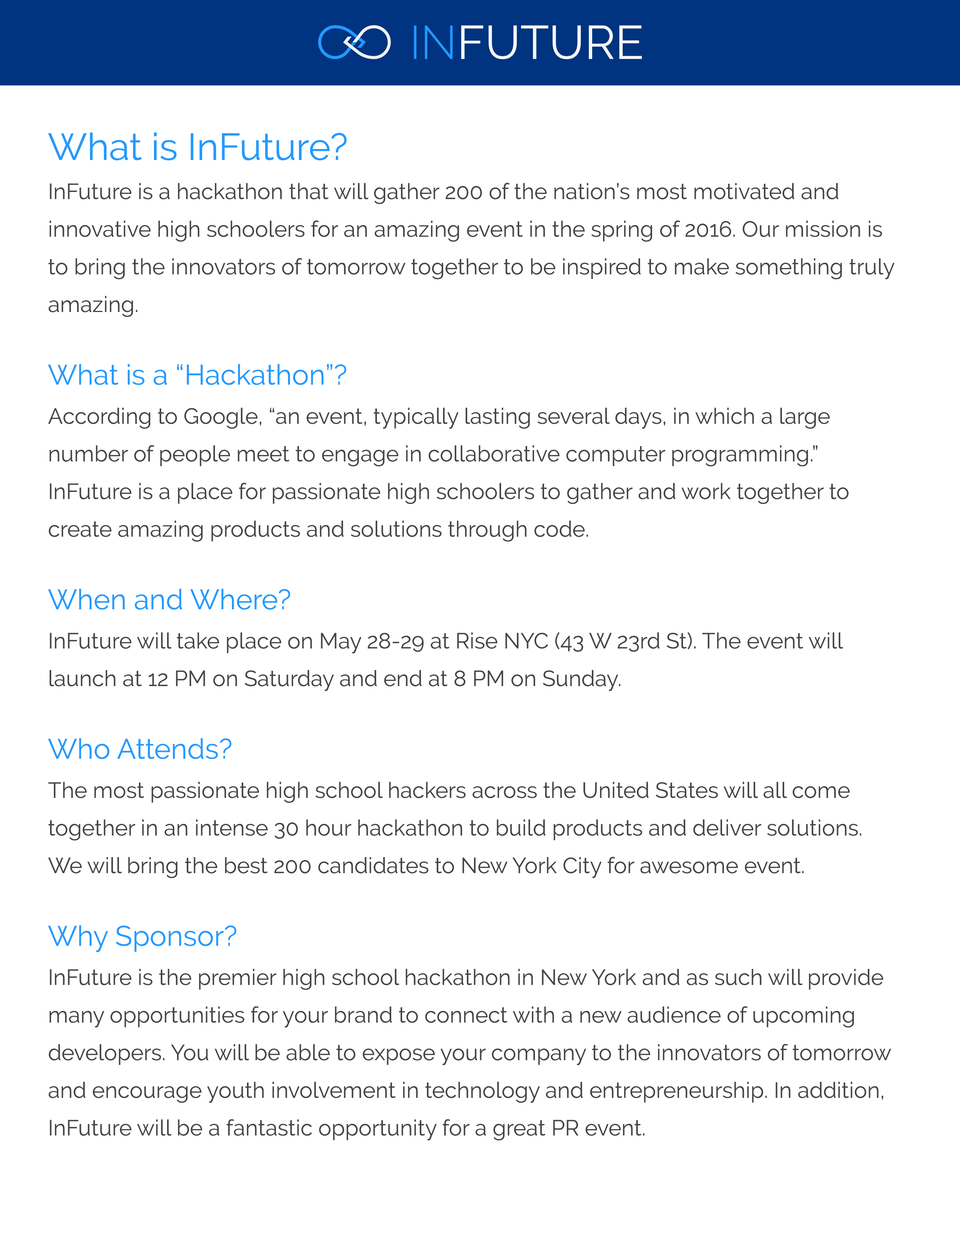
<style>
.page{position:relative;width:960px;height:1242px;background:#ffffff}
.page>*{position:absolute;margin:0}
.t1{font:47.1px "Raleway-Regular";color:#f7f7f7}
.t2{font:47.1px "Raleway-Light";color:#229aff}
.t3{font:37.6px "Raleway-Regular";color:#229aff}
.t4{font:22px/37.6px "Raleway-Regular";color:#444444}
.t5{font:28.2px "Raleway-Regular";color:#229aff}
</style>
<div class="page">
<p class="t1" style="left:414px;top:25px;width:228px;height:34px"><span class="t2">IN</span>FUTURE</p>
<p class="t3" style="left:48px;top:133px;width:299px;height:27px">What is InFuture?</p>
<p class="t4" style="left:48px;top:183px;width:846px;height:134px">InFuture is a hackathon that will gather 200 of the nation’s most motivated and<br>innovative high schoolers for an amazing event in the spring of 2016. Our mission is<br>to bring the innovators of tomorrow together to be inspired to make something truly<br>amazing.</p>
<p class="t5" style="left:48px;top:364px;width:298px;height:21px">What is a “Hackathon”?</p>
<p class="t4" style="left:48px;top:408px;width:800px;height:134px">According to Google, “an event, typically lasting several days, in which a large<br>number of people meet to engage in collaborative computer programming.”<br>InFuture is a place for passionate high schoolers to gather and work together to<br>create amazing products and solutions through code.</p>
<p class="t5" style="left:48px;top:589px;width:242px;height:21px">When and Where?</p>
<p class="t4" style="left:49px;top:632px;width:794px;height:60px">InFuture will take place on May 28-29 at Rise NYC (43 W 23rd St). The event will<br>launch at 12 PM on Saturday and end at 8 PM on Sunday.</p>
<p class="t5" style="left:48px;top:738px;width:184px;height:21px">Who Attends?</p>
<p class="t4" style="left:48px;top:782px;width:813px;height:97px">The most passionate high school hackers across the United States will all come<br>together in an intense 30 hour hackathon to build products and deliver solutions.<br>We will bring the best 200 candidates to New York City for awesome event.</p>
<p class="t5" style="left:48px;top:925px;width:188px;height:27px">Why Sponsor?</p>
<p class="t4" style="left:49px;top:969px;width:842px;height:172px">InFuture is the premier high school hackathon in New York and as such will provide<br>many opportunities for your brand to connect with a new audience of upcoming<br>developers. You will be able to expose your company to the innovators of tomorrow<br>and encourage youth involvement in technology and entrepreneurship. In addition,<br>InFuture will be a fantastic opportunity for a great PR event.</p>
</div>
